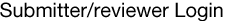
<style>
.page{position:relative;width:225px;height:21px;background:#ffffff}
.page>*{position:absolute;margin:0}
.t1{font:20px "HelveticaNeueLTPro-Roman";color:#000000}
</style>
<div class="page">
<p class="t1" style="left:0px;top:2px;width:223px;height:20px">Submitter/reviewer Login</p>
</div>
